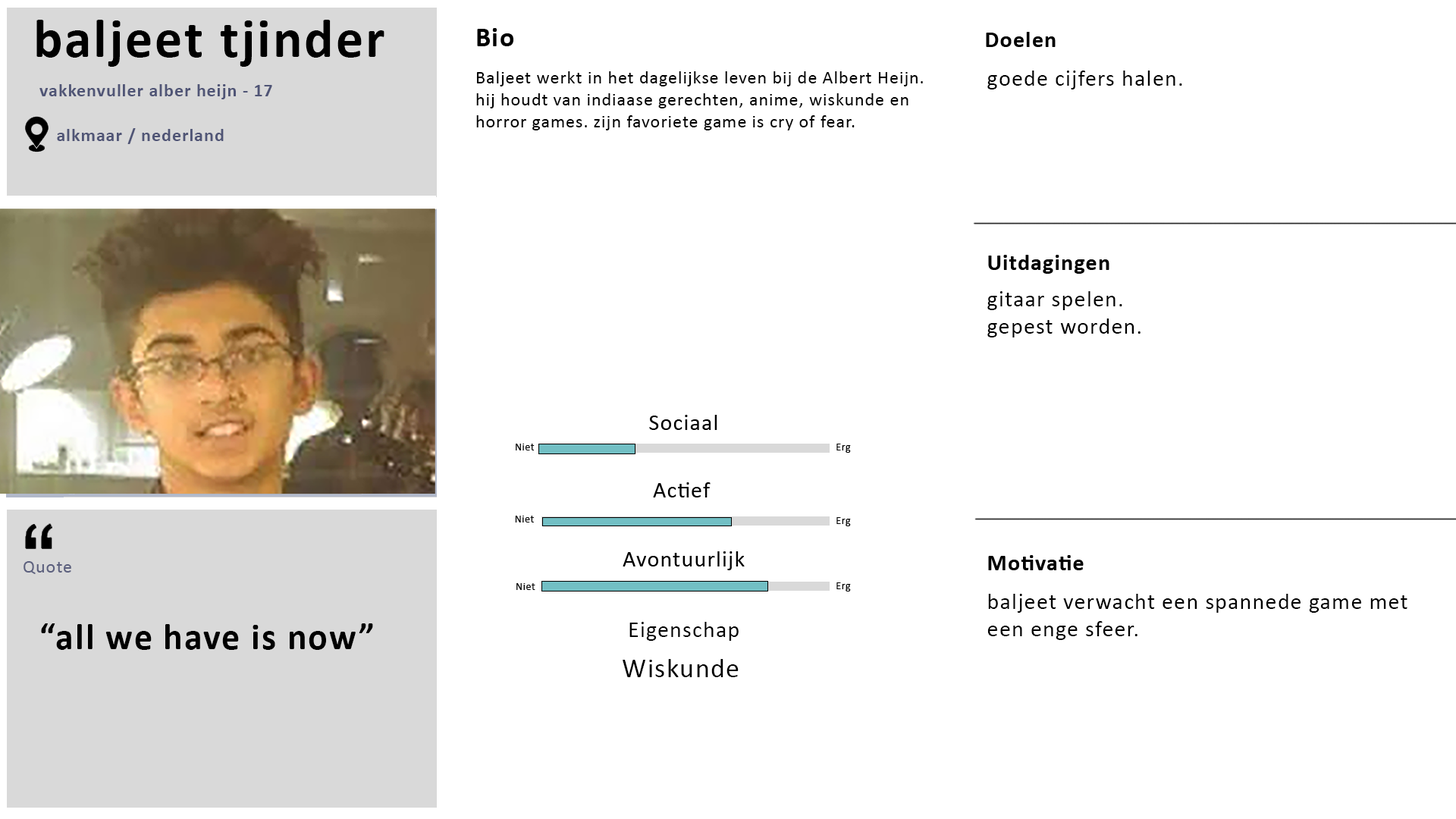
<style>
.page{position:relative;width:1456px;height:819px;background:#ffffff}
.page>*{position:absolute;margin:0}
.t1{font:54.6px "Calibri-Bold";letter-spacing:0.04em;color:#000000}
.t2{font:18.2px "Calibri";letter-spacing:0.04em;color:#000000}
.t3{font:22.7px "Calibri";letter-spacing:0.04em;color:#000000}
.t4{font:18.2px "Calibri-Bold";letter-spacing:0.04em;color:#505576}
.t5{font:18.2px "Calibri";letter-spacing:0.04em;color:#5c607e}
.t6{font:36.4px "Calibri-Bold";letter-spacing:0.04em;color:#000000}
.t7{font:27.3px "Calibri";letter-spacing:0.04em;color:#000000}
</style>
<div class="page">
<p class="t1" style="left:36px;top:20px;width:348px;height:47px">baljeet tjinder</p>
<p class="t2" style="left:476px;top:71px;width:447px;height:59px">Baljeet werkt in het dagelijkse leven bij de Albert Heijn. hij houdt van indiaase gerechten, anime, wiskunde en horror games. zijn favoriete game is cry of fear.</p>
<p class="t3" style="left:987px;top:71px;width:195px;height:18px">goede cijfers halen.</p>
<p class="t4" style="left:39px;top:84px;width:233px;height:15px">vakkenvuller alber heijn - 17</p>
<p class="t4" style="left:57px;top:128px;width:167px;height:16px">alkmaar / nederland</p>
<p class="t3" style="left:987px;top:291px;width:154px;height:46px">gitaar spelen.<br>gepest worden.</p>
<p class="t5" style="left:24px;top:561px;width:47px;height:13px">Quote</p>
<p class="t3" style="left:987px;top:594px;width:420px;height:46px">baljeet verwacht een spannede game met een enge sfeer.</p>
<p class="t6" style="left:41px;top:623px;width:332px;height:27px">“all we have is now”</p>
<p class="t3" style="left:629px;top:622px;width:110px;height:19px">Eigenschap</p>
<p class="t7" style="left:623px;top:659px;width:116px;height:18px">Wiskunde</p>
</div>
